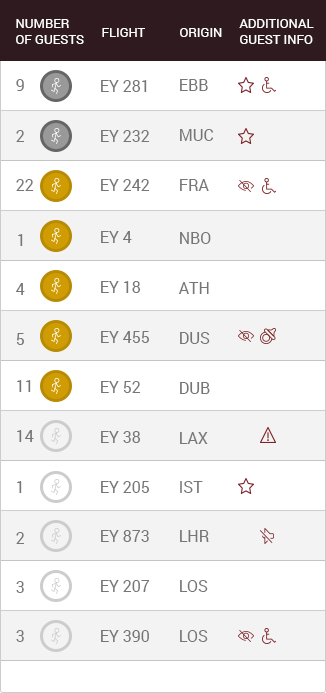
<style>
.page{position:relative;width:326px;height:693px;background:#ffffff}
.page>*{position:absolute;margin:0}
.t1{font:13px "Roboto-Regular";color:#ffffff;text-transform:uppercase}
.t2{font:16px "Roboto-Regular";color:#767676}
</style>
<div class="page">
<p class="t1" style="left:16px;top:19px;width:68px;height:25px">Number<br>of Guests</p>
<p class="t1" style="left:102px;top:28px;width:43px;height:9px">Flight</p>
<p class="t1" style="left:180px;top:28px;width:42px;height:9px">Origin</p>
<p class="t1" style="left:239px;top:19px;width:75px;height:25px">Additional<br>Guest Info</p>
<p class="t2" style="left:16px;top:79px;width:8px;height:12px">9</p>
<p class="t2" style="left:101px;top:80px;width:46px;height:12px">EY 281</p>
<p class="t2" style="left:180px;top:79px;width:28px;height:12px">EBB</p>
<p class="t2" style="left:16px;top:130px;width:9px;height:12px">2</p>
<p class="t2" style="left:101px;top:130px;width:49px;height:12px">EY 232</p>
<p class="t2" style="left:180px;top:129px;width:33px;height:12px">MUC</p>
<p class="t2" style="left:16px;top:179px;width:18px;height:12px">22</p>
<p class="t2" style="left:101px;top:179px;width:49px;height:12px">EY 242</p>
<p class="t2" style="left:180px;top:179px;width:29px;height:12px">FRA</p>
<p class="t2" style="left:101px;top:231px;width:31px;height:12px">EY 4</p>
<p class="t2" style="left:180px;top:232px;width:31px;height:12px">NBO</p>
<p class="t2" style="left:18px;top:234px;width:5px;height:12px">1</p>
<p class="t2" style="left:101px;top:281px;width:40px;height:12px">EY 18</p>
<p class="t2" style="left:16px;top:283px;width:9px;height:12px">4</p>
<p class="t2" style="left:178px;top:282px;width:31px;height:12px">ATH</p>
<p class="t2" style="left:16px;top:333px;width:8px;height:12px">5</p>
<p class="t2" style="left:101px;top:331px;width:48px;height:12px">EY 455</p>
<p class="t2" style="left:180px;top:332px;width:30px;height:12px">DUS</p>
<p class="t2" style="left:17px;top:380px;width:14px;height:12px">11</p>
<p class="t2" style="left:101px;top:381px;width:40px;height:12px">EY 52</p>
<p class="t2" style="left:180px;top:382px;width:30px;height:12px">DUB</p>
<p class="t2" style="left:17px;top:430px;width:17px;height:12px">14</p>
<p class="t2" style="left:101px;top:431px;width:40px;height:12px">EY 38</p>
<p class="t2" style="left:180px;top:432px;width:28px;height:12px">LAX</p>
<p class="t2" style="left:17px;top:481px;width:5px;height:12px">1</p>
<p class="t2" style="left:101px;top:481px;width:48px;height:12px">EY 205</p>
<p class="t2" style="left:180px;top:481px;width:23px;height:12px">IST</p>
<p class="t2" style="left:16px;top:532px;width:9px;height:12px">2</p>
<p class="t2" style="left:101px;top:530px;width:48px;height:12px">EY 873</p>
<p class="t2" style="left:180px;top:530px;width:29px;height:12px">LHR</p>
<p class="t2" style="left:16px;top:581px;width:8px;height:12px">3</p>
<p class="t2" style="left:101px;top:580px;width:49px;height:12px">EY 207</p>
<p class="t2" style="left:180px;top:580px;width:28px;height:12px">LOS</p>
<p class="t2" style="left:16px;top:630px;width:8px;height:12px">3</p>
<p class="t2" style="left:101px;top:630px;width:48px;height:12px">EY 390</p>
<p class="t2" style="left:180px;top:630px;width:28px;height:12px">LOS</p>
</div>
